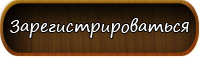
<style>
.page{position:relative;width:200px;height:57px}
.page>*{position:absolute;margin:0}
.t1{font:16px "SegoePrint";color:#ffffff}
</style>
<div class="page">
<p class="t1" style="left:10px;top:18px;width:179px;height:20px">Зарегистрироваться</p>
</div>
